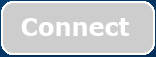
<style>
.page{position:relative;width:156px;height:57px;background:#cdcdcd}
.page>*{position:absolute;margin:0}
.t1{font:24px "Verdana-Bold";color:#ffffff}
</style>
<div class="page">
<p class="t1" style="left:21px;top:18px;width:108px;height:18px">Connect</p>
</div>
